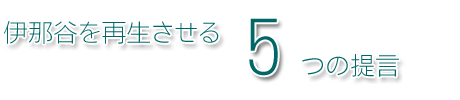
<style>
.page{position:relative;width:460px;height:100px;background:#ffffff}
.page>*{position:absolute;margin:0}
.t1{font:25px "NfMotoyaCedar-W1-90mskp-RKSJ-H";color:#006666}
.t2{font:75px "NfMotoyaCedar-W1-90mskp-RKSJ-H";color:#006666}
</style>
<div class="page">
<p class="t1" style="left:4px;top:21px;width:215px;height:23px">伊那谷を再生させる</p>
<p class="t1" style="left:249px;top:18px;width:150px;height:59px"><span class="t2">５</span>つの提言</p>
</div>
